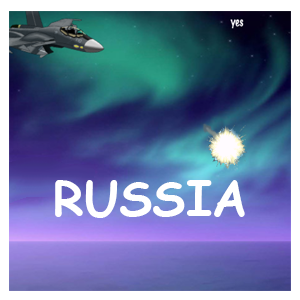
<style>
.page{position:relative;width:300px;height:300px}
.page>*{position:absolute;margin:0}
.t1{font:48px "ComicSansMS-Bold";color:#ffffff}
</style>
<div class="page">
<p class="t1" style="left:55px;top:180px;width:190px;height:38px">RUSSIA</p>
</div>
